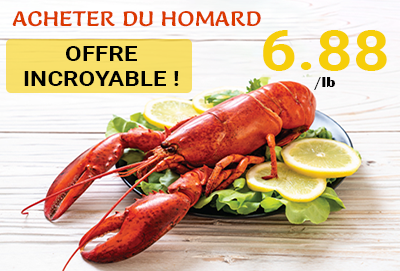
<style>
.page{position:relative;width:400px;height:271px}
.page>*{position:absolute;margin:0}
.t1{font:20.7px "Salsa-Regular";color:#db3900;scale:1.18 1}
.t2{font:54.7px "Roboto-Bold";color:#f6ce0a;scale:1.18 1}
.t3{font:14.6px "BritannicBold";color:#030303;scale:1.18 1}
.t4{font:20.7px "Roboto-Bold";color:#000000;scale:1.18 1}
</style>
<div class="page">
<p class="t1" style="left:12px;top:11px;width:249px;height:16px">ACHETER DU HOMARD</p>
<p class="t2" style="left:263px;top:30px;width:124px;height:60px;text-align:center">6.88<br><span class="t3">/lb</span></p>
<p class="t4" style="left:24px;top:46px;width:155px;height:40px;text-align:center">OFFRE<br>INCROYABLE !</p>
</div>
